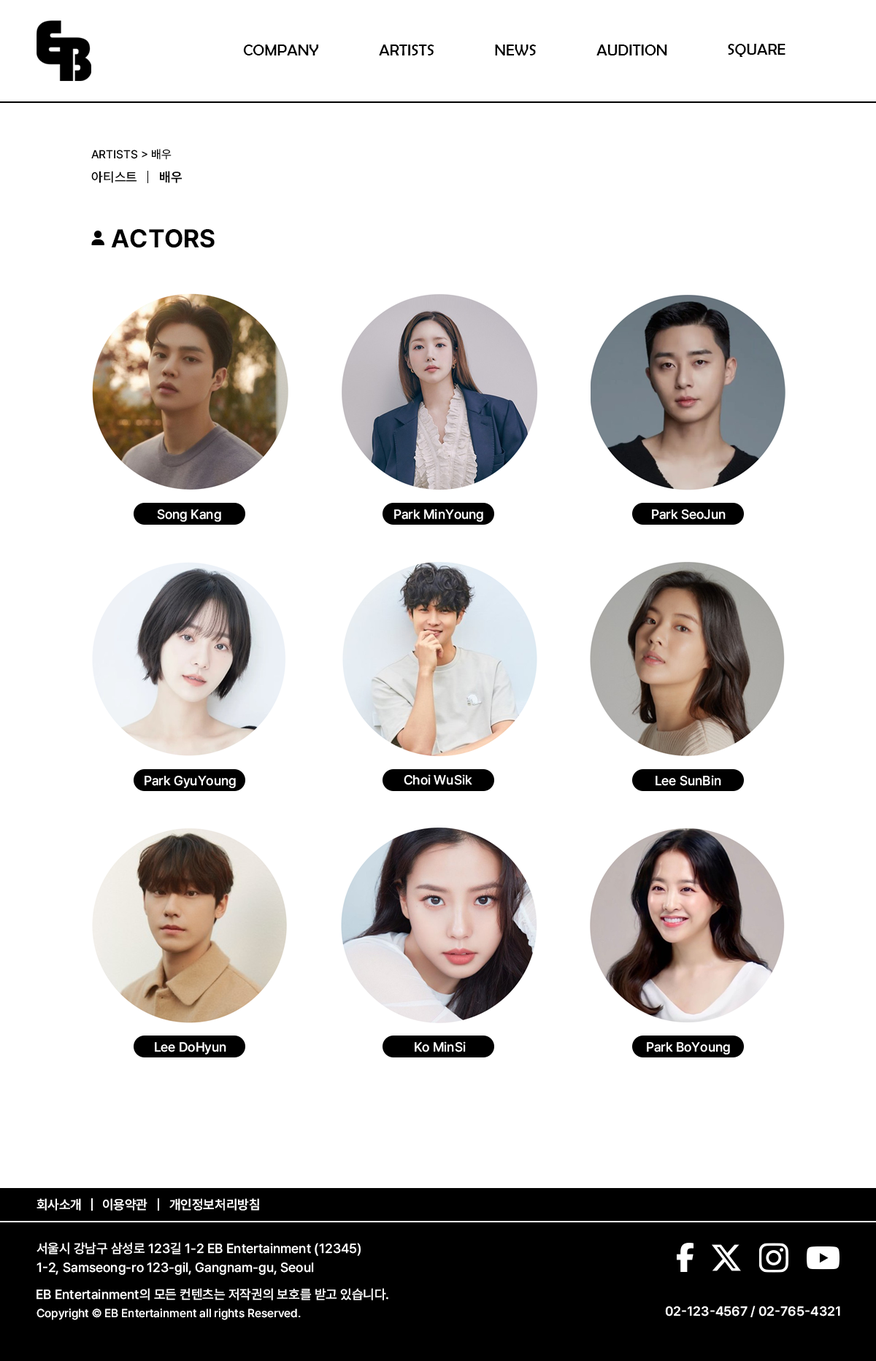
<style>
.page{position:relative;width:876px;height:1361px;background:#ffffff}
.page>*{position:absolute;margin:0}
.t1{font:16.1px "BerlinSansFB-Reg";color:#000000}
.t2{font:11.7px "Pretendard-Medium";color:#000000}
.t3{font:13.1px "Pretendard-Medium";color:#000000}
.t4{font:13.1px "Pretendard-Bold";color:#000000}
.t5{font:25.5px "Pretendard-Bold";color:#000000}
.t6{font:13.1px "Pretendard-Medium";color:#ffffff}
.t7{font:13.1px "Pretendard-SemiBold";color:#ffffff}
.t8{font:13.1px/19px "Pretendard-Medium";color:#ffffff}
.t9{font:11.7px "Pretendard-Medium";color:#ffffff}
</style>
<div class="page">
<p class="t1" style="left:243px;top:45px;width:75px;height:10px">COMPANY</p>
<p class="t1" style="left:379px;top:45px;width:55px;height:10px">ARTISTS</p>
<p class="t1" style="left:495px;top:45px;width:42px;height:10px">NEWS</p>
<p class="t1" style="left:596px;top:45px;width:71px;height:10px">AUDITION</p>
<p class="t1" style="left:728px;top:44px;width:57px;height:13px">SQUARE</p>
<p class="t2" style="left:91px;top:149px;width:81px;height:11px">ARTISTS &gt; 배우</p>
<p class="t3" style="left:91px;top:171px;width:46px;height:12px">아티스트</p>
<p class="t4" style="left:160px;top:171px;width:22px;height:12px">배우</p>
<p class="t5" style="left:111px;top:229px;width:104px;height:19px">ACTORS</p>
<p class="t6" style="left:157px;top:509px;width:64px;height:13px">Song Kang</p>
<p class="t6" style="left:394px;top:509px;width:89px;height:13px">Park MinYoung</p>
<p class="t6" style="left:652px;top:509px;width:74px;height:11px">Park SeoJun</p>
<p class="t6" style="left:145px;top:776px;width:91px;height:12px">Park GyuYoung</p>
<p class="t6" style="left:404px;top:774px;width:68px;height:11px">Choi WuSik</p>
<p class="t6" style="left:655px;top:775px;width:66px;height:11px">Lee SunBin</p>
<p class="t6" style="left:155px;top:1042px;width:71px;height:13px">Lee DoHyun</p>
<p class="t6" style="left:415px;top:1042px;width:51px;height:11px">Ko MinSi</p>
<p class="t6" style="left:647px;top:1042px;width:83px;height:13px">Park BoYoung</p>
<p class="t7" style="left:36px;top:1199px;width:45px;height:12px">회사소개</p>
<p class="t7" style="left:103px;top:1199px;width:44px;height:12px">이용약관</p>
<p class="t7" style="left:169px;top:1199px;width:90px;height:12px">개인정보처리방침</p>
<p class="t8" style="left:36px;top:1242px;width:325px;height:33px">서울시 강남구 삼성로 123길 1-2 EB Entertainment (12345)<br>1-2, Samseong-ro 123-gil, Gangnam-gu, Seoul</p>
<p class="t6" style="left:36px;top:1288px;width:352px;height:13px">EB Entertainment의 모든 컨텐츠는 저작권의 보호를 받고 있습니다.</p>
<p class="t9" style="left:36px;top:1309px;width:265px;height:11px">Copyright © EB Entertainment all rights Reserved.</p>
<p class="t7" style="left:665px;top:1306px;width:175px;height:12px">02-123-4567 / 02-765-4321</p>
</div>
